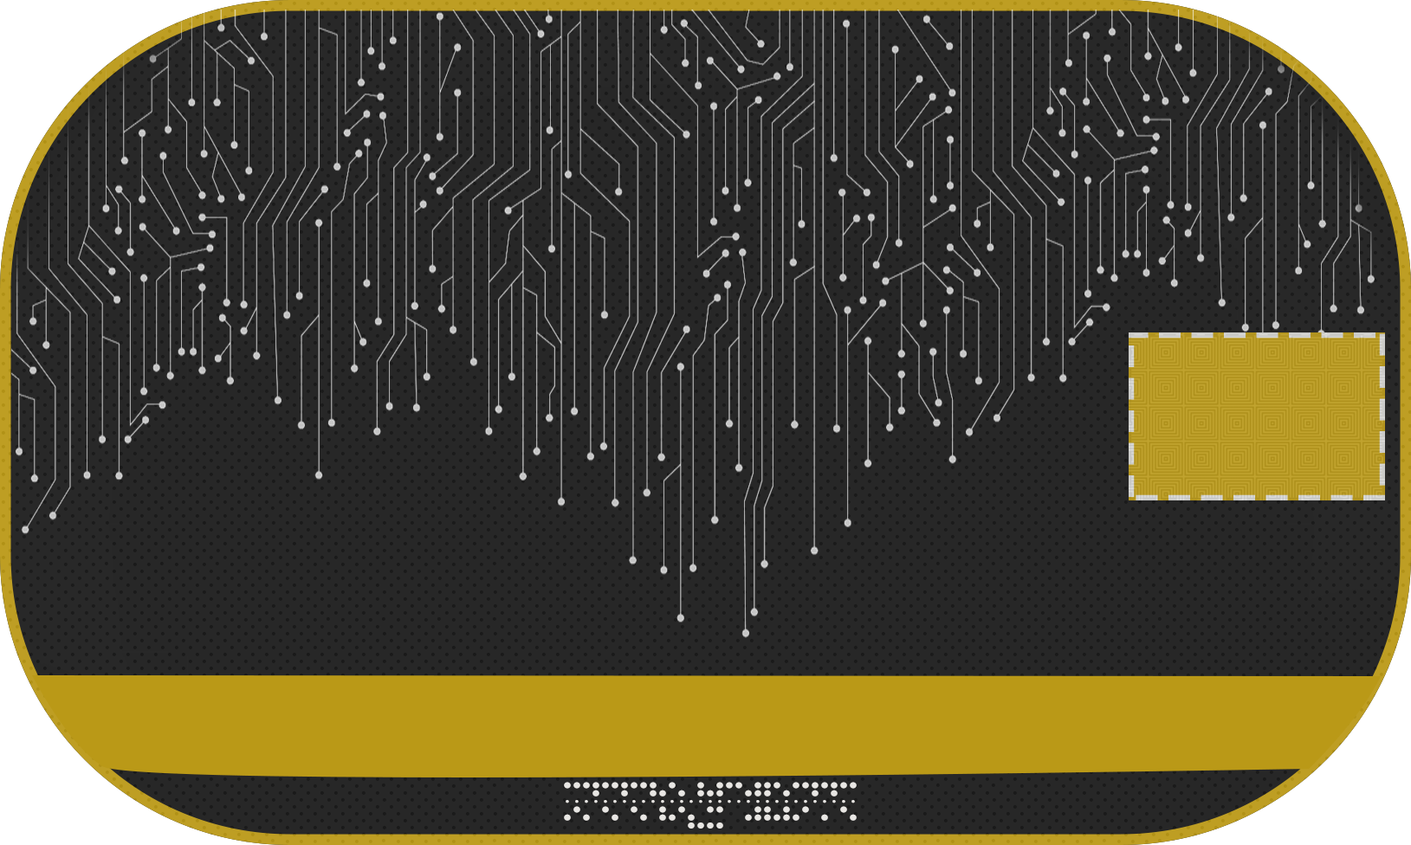
<style>
.page{position:relative;width:1411px;height:845px;background:#272727}
.page>*{position:absolute;margin:0}
.t1{font:66.4px "Baudot5";letter-spacing:-0.016em;color:#e8e6e3;scale:1.09 1}
</style>
<div class="page">
<p class="t1" style="left:564px;top:782px;width:293px;height:47px">dsdasdasdacdi9201334[[dcdsadasd</p>
</div>
